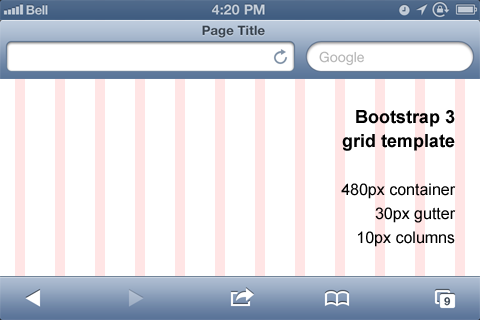
<style>
.page{position:relative;width:480px;height:320px;background:#ffffff}
.page>*{position:absolute;margin:0}
.t1{font:16px/24px "ArialMT";color:#000000}
.t2{font:18px/24px "Arial-BoldMT";color:#000000}
</style>
<div class="page">
<p class="t1" style="left:341px;top:110px;width:115px;height:137px;text-align:right"><span class="t2">Bootstrap 3<br>grid template<br><br></span>480px container<br>30px gutter<br>10px columns</p>
</div>
